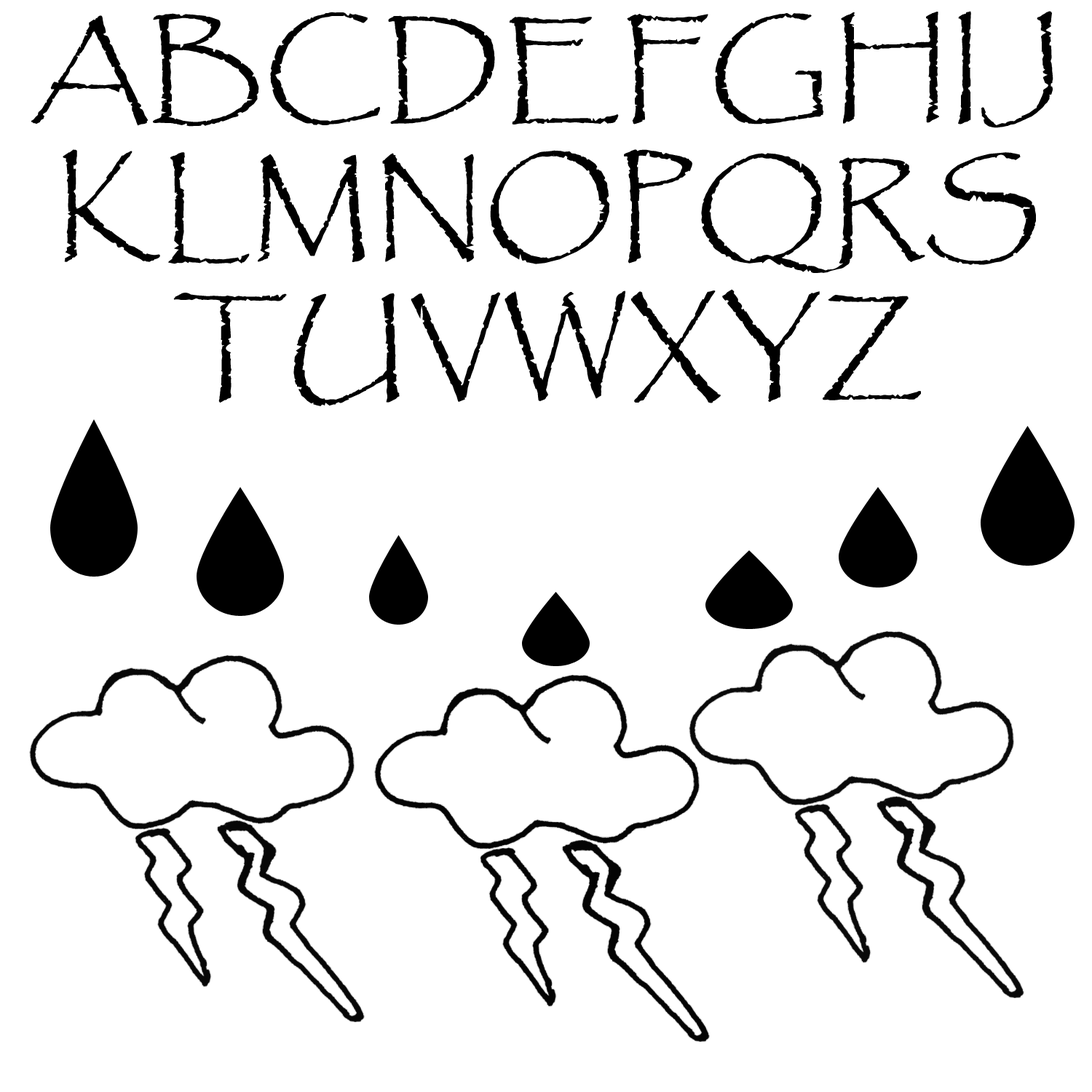
<style>
.page{position:relative;width:1092px;height:1092px;background:#ffffff}
.page>*{position:absolute;margin:0}
.t1{font:115.5px "Papyrus-Regular";color:#000000;scale:1.04 1}
</style>
<div class="page">
<p class="t1" style="left:31px;top:11px;width:1022px;height:395px;text-align:center">ABCDEFGHIJ<br>KLMNOPQRS<br>TUVWXYZ</p>
</div>
